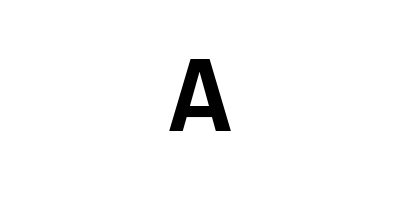
<style>
.page{position:relative;width:400px;height:200px;background:#ffffff}
.page>*{position:absolute;margin:0}
.t1{font:112.5px "Consolas-Bold";letter-spacing:0.05em;color:#000000}
</style>
<div class="page">
<p class="t1" style="left:169px;top:59px;width:62px;height:72px">A</p>
</div>
